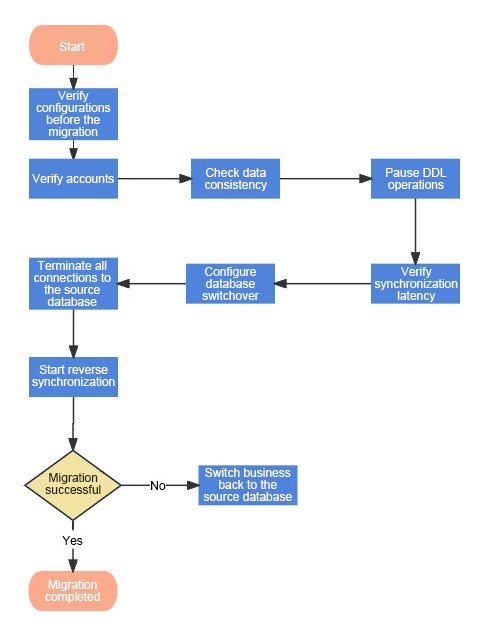
<style>
.page{position:relative;width:485px;height:635px;background:#ffffff}
.page>*{position:absolute;margin:0}
.t1{font:12px "ArialMT";color:#ffffff}
.t2{font:12px/12px "ArialMT";color:#ffffff}
.t3{font:12px/12px "ArialMT";color:#262626}
.t4{font:12px "ArialMT";color:#000000}
</style>
<div class="page">
<p class="t1" style="left:59px;top:42px;width:26px;height:9px">Start</p>
<p class="t2" style="left:36px;top:91px;width:75px;height:47px;text-align:center">Verify configurations before the migration</p>
<p class="t1" style="left:32px;top:174px;width:82px;height:11px">Verify accounts</p>
<p class="t2" style="left:205px;top:168px;width:62px;height:23px;text-align:center">Check data consistency</p>
<p class="t2" style="left:386px;top:168px;width:61px;height:23px;text-align:center">Pause DDL operations</p>
<p class="t2" style="left:34px;top:261px;width:77px;height:45px;text-align:center">Terminate all connections to the source database</p>
<p class="t2" style="left:202px;top:267px;width:57px;height:33px;text-align:center">Configure database switchover</p>
<p class="t2" style="left:374px;top:267px;width:84px;height:35px;text-align:center">Verify synchronization latency</p>
<p class="t2" style="left:32px;top:365px;width:83px;height:23px;text-align:center">Start reverse synchronization</p>
<p class="t3" style="left:45px;top:473px;width:56px;height:21px;text-align:center">Migration successful</p>
<p class="t2" style="left:203px;top:468px;width:89px;height:33px;text-align:center">Switch business back to the source database</p>
<p class="t4" style="left:151px;top:481px;width:15px;height:9px">No</p>
<p class="t4" style="left:62px;top:536px;width:21px;height:9px">Yes</p>
<p class="t2" style="left:45px;top:580px;width:55px;height:23px;text-align:center">Migration completed</p>
</div>
